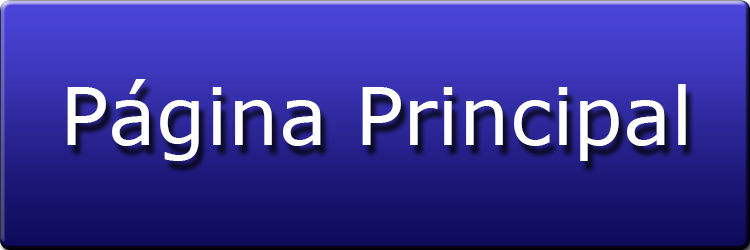
<style>
.page{position:relative;width:750px;height:250px}
.page>*{position:absolute;margin:0}
.t1{font:80px "Verdana";color:#ffffff}
</style>
<div class="page">
<p class="t1" style="left:67px;top:79px;width:619px;height:82px">Página Principal</p>
</div>
